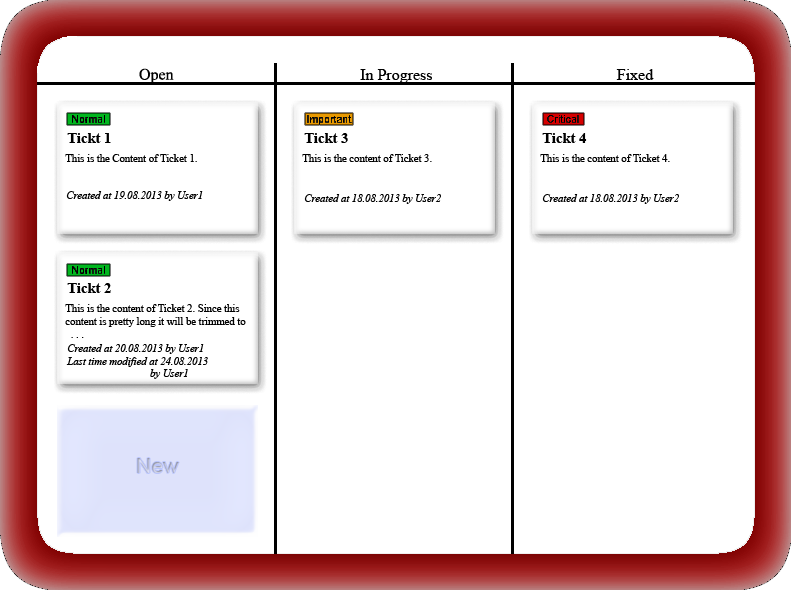
<style>
.page{position:relative;width:791px;height:590px;background:#ffffff}
.page>*{position:absolute;margin:0}
.t1{font:16px "TimesNewRomanPSMT";color:#010101}
.t2{font:16px "TimesNewRomanPSMT";color:#000000}
.t3{font:14.6px "TimesNewRomanPS-BoldMT";color:#000000}
.t4{font:10.6px "TimesNewRomanPSMT";color:#000000}
.t5{font:10.6px "TimesNewRomanPS-ItalicMT";color:#000000}
.t6{font:21.3px "ArialMT"}
</style>
<div class="page">
<p class="t1" style="left:139px;top:68px;width:35px;height:16px">Open</p>
<p class="t1" style="left:360px;top:69px;width:72px;height:14px">In Progress</p>
<p class="t2" style="left:616px;top:69px;width:38px;height:11px">Fixed</p>
<p class="t3" style="left:67px;top:133px;width:44px;height:10px">Tickt 1</p>
<p class="t3" style="left:304px;top:133px;width:44px;height:10px">Tickt 3</p>
<p class="t3" style="left:542px;top:133px;width:45px;height:10px">Tickt 4</p>
<p class="t4" style="left:65px;top:154px;width:132px;height:8px">This is the Content of Ticket 1.</p>
<p class="t4" style="left:302px;top:154px;width:130px;height:8px">This is the content of Ticket 3.</p>
<p class="t4" style="left:540px;top:154px;width:130px;height:8px">This is the content of Ticket 4.</p>
<p class="t5" style="left:66px;top:191px;width:137px;height:10px">Created at 19.08.2013 by User1</p>
<p class="t5" style="left:304px;top:194px;width:137px;height:10px">Created at 18.08.2013 by User2</p>
<p class="t5" style="left:542px;top:194px;width:137px;height:10px">Created at 18.08.2013 by User2</p>
<p class="t3" style="left:67px;top:283px;width:44px;height:10px">Tickt 2</p>
<p class="t4" style="left:65px;top:304px;width:181px;height:34px">This is the content of Ticket 2. Since this content is pretty long it will be trimmed to<br>  . . .</p>
<p class="t5" style="left:66px;top:344px;width:142px;height:35px">Created at 20.08.2013 by User1<br>Last time modified at 24.08.2013<br>      by User1</p>
<p class="t6" style="left:137px;top:458px;width:42px;height:15px">New</p>
</div>
